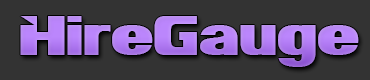
<style>
.page{position:relative;width:370px;height:80px;background:#333333}
.page>*{position:absolute;margin:0}
.t1{font:55px "InfiniteJusticeStraight";color:#b885f3}
</style>
<div class="page">
<p class="t1" style="left:20px;top:16px;width:339px;height:51px">HireGauge</p>
</div>
